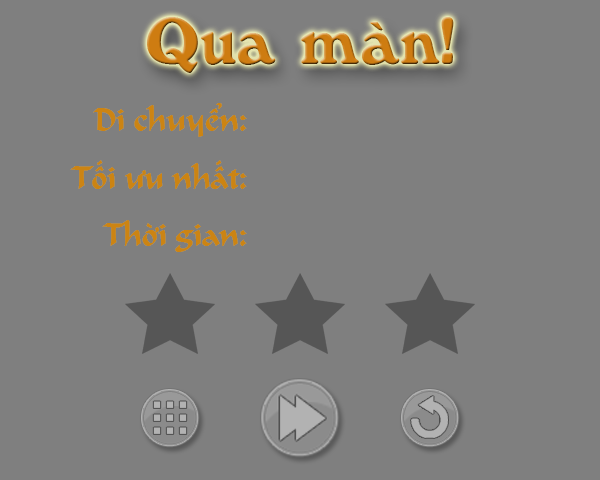
<style>
.page{position:relative;width:600px;height:480px;background:#7f7f7f}
.page>*{position:absolute;margin:0}
.t1{font:60px "Windsor-Bold";color:#ce7c11}
.t2{font:30px "UVNDungDan";color:#cc8413}
</style>
<div class="page">
<p class="t1" style="left:147px;top:17px;width:307px;height:56px">Qua màn!</p>
<p class="t2" style="left:70px;top:103px;width:177px;height:149px;text-align:right">Di chuyển:<br><br>Tối ưu nhất:<br><br>Thời gian:</p>
</div>
